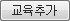
<style>
.page{position:relative;width:70px;height:21px}
.page>*{position:absolute;margin:0}
.t1{font:12px "Gulim";letter-spacing:-0.03em;color:#2c2c2c}
</style>
<div class="page">
<p class="t1" style="left:12px;top:5px;width:45px;height:11px">교육추가</p>
</div>
